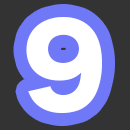
<style>
.page{position:relative;width:130px;height:130px;background:#333333}
.page>*{position:absolute;margin:0}
.t1{font:110.5px "HiraKakuStdN-W8";color:#ffffff}
</style>
<div class="page">
<p class="t1" style="left:26px;top:17px;width:76px;height:97px">９</p>
</div>
